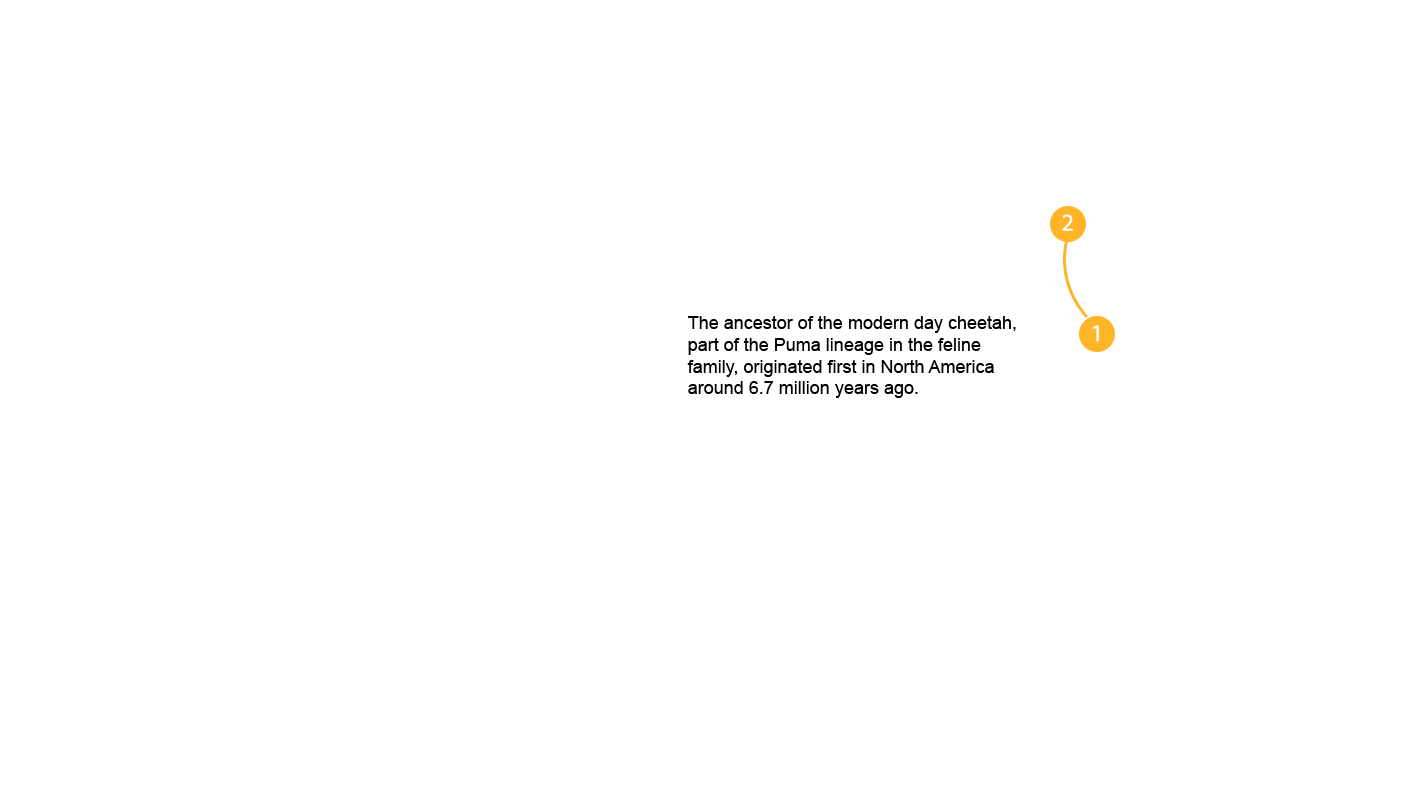
<style>
.page{position:relative;width:1415px;height:809px;background:#ffffff}
.page>*{position:absolute;margin:0}
.t1{font:18px "ArialMT";color:#000000}
</style>
<div class="page">
<p class="t1" style="left:687px;top:316px;width:329px;height:82px">The ancestor of the modern day cheetah,<br>part of the Puma lineage in the feline<br>family, originated first in North America<br>around 6.7 million years ago.</p>
</div>
